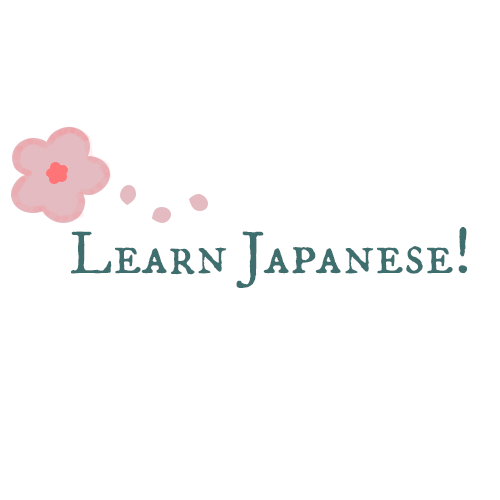
<style>
.page{position:relative;width:500px;height:500px;background:#ffffff}
.page>*{position:absolute;margin:0}
.t1{font:60px "IM_FELL_DW_Pica_SC";letter-spacing:0.005em;color:#3e6e6d}
</style>
<div class="page">
<p class="t1" style="left:71px;top:227px;width:396px;height:61px">Learn Japanese!</p>
</div>
